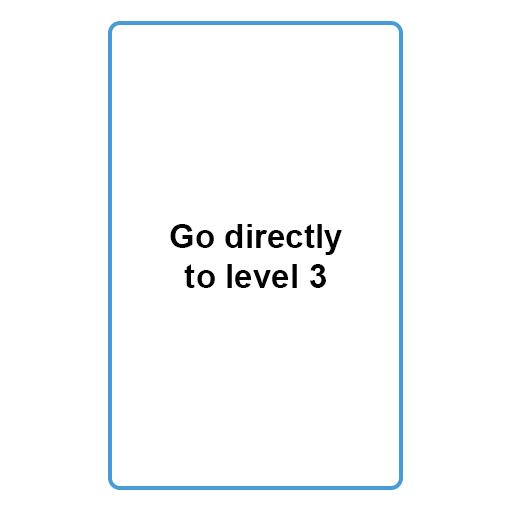
<style>
.page{position:relative;width:512px;height:512px;background:#ffffff}
.page>*{position:absolute;margin:0}
.t1{font:33.3px "Arial-BoldMT";color:#000000}
</style>
<div class="page">
<p class="t1" style="left:170px;top:224px;width:172px;height:64px;text-align:center">Go directly<br>to level 3</p>
</div>
